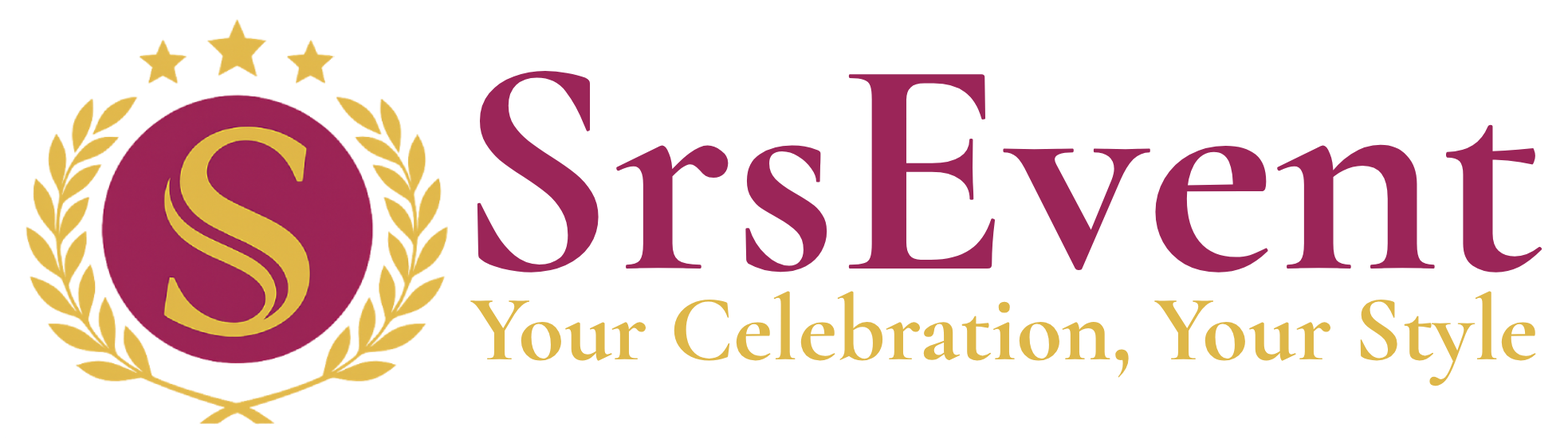
<style>
.page{position:relative;width:1568px;height:447px;background:#ffffff}
.page>*{position:absolute;margin:0}
.t1{font:310.9px "CormorantGaramond-Bold";color:#9b2558}
.t2{font:94.1px "CormorantGaramond-Bold";color:#deb748}
</style>
<div class="page">
<p class="t1" style="left:477px;top:70px;width:1065px;height:203px">SrsEvent</p>
<p class="t2" style="left:470px;top:291px;width:1066px;height:96px">Your Celebration, Your Style</p>
</div>
